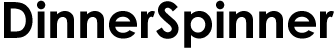
<style>
.page{position:relative;width:335px;height:52px;background:#ffffff}
.page>*{position:absolute;margin:0}
.t1{font:50px "CenturyGothic-Bold";color:#000000}
</style>
<div class="page">
<p class="t1" style="left:4px;top:0px;width:330px;height:48px">DinnerSpinner</p>
</div>
